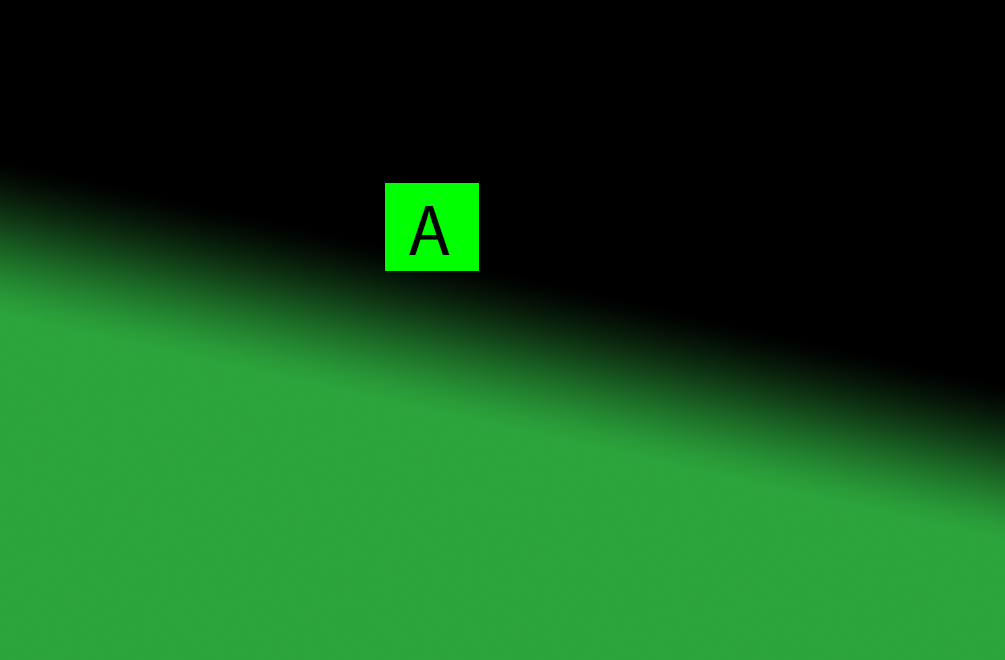
<style>
.page{position:relative;width:1005px;height:660px;background:#000000}
.page>*{position:absolute;margin:0}
.t1{font:72px "MyriadPro-Regular";color:#000000}
</style>
<div class="page">
<p class="t1" style="left:409px;top:206px;width:41px;height:49px">A</p>
</div>
